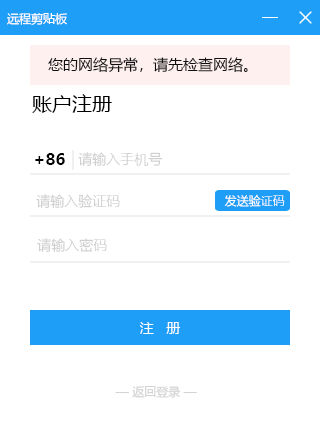
<style>
.page{position:relative;width:320px;height:440px;background:#ffffff}
.page>*{position:absolute;margin:0}
.t1{font:12px "MicrosoftYaHei";color:#ffffff}
.t2{font:15px "MicrosoftYaHei";color:#101010}
.t3{font:20px "MicrosoftYaHei";color:#000000}
.t4{font:16px "MicrosoftYaHei-Bold";color:#000000}
.t5{font:14px "MicrosoftYaHeiLight";color:#cccccc}
.t6{font:12px "MicrosoftYaHeiLight";color:#ffffff}
.t7{font:14px "MicrosoftYaHeiLight";color:#ffffff}
.t8{font:14px "MicrosoftYaHei";color:#ffffff}
.t9{font:12px "MicrosoftYaHei";color:#d3d3d3}
</style>
<div class="page">
<p class="t1" style="left:7px;top:12px;width:60px;height:13px">远程剪贴板</p>
<p class="t2" style="left:48px;top:57px;width:200px;height:16px">您的网络异常，请先检查网络。</p>
<p class="t3" style="left:32px;top:94px;width:80px;height:19px">账户注册</p>
<p class="t4" style="left:35px;top:153px;width:30px;height:12px">+86</p>
<p class="t4" style="left:35px;top:153px;width:30px;height:12px">+86</p>
<p class="t5" style="left:78px;top:152px;width:85px;height:14px">请输入手机号</p>
<p class="t5" style="left:78px;top:152px;width:85px;height:14px">请输入手机号</p>
<p class="t5" style="left:36px;top:194px;width:84px;height:14px">请输入验证码</p>
<p class="t5" style="left:36px;top:194px;width:84px;height:14px">请输入验证码</p>
<p class="t6" style="left:224px;top:194px;width:61px;height:13px">发送验证码</p>
<p class="t6" style="left:224px;top:194px;width:61px;height:13px">发送验证码</p>
<p class="t7" style="left:37px;top:238px;width:126px;height:14px">请输入修改后的密码</p>
<p class="t5" style="left:37px;top:238px;width:70px;height:14px">请输入密码</p>
<p class="t8" style="left:140px;top:322px;width:41px;height:12px">注   册</p>
<p class="t9" style="left:115px;top:386px;width:82px;height:12px">— 返回登录 —</p>
<p class="t9" style="left:115px;top:386px;width:82px;height:12px">— 返回登录 —</p>
</div>
